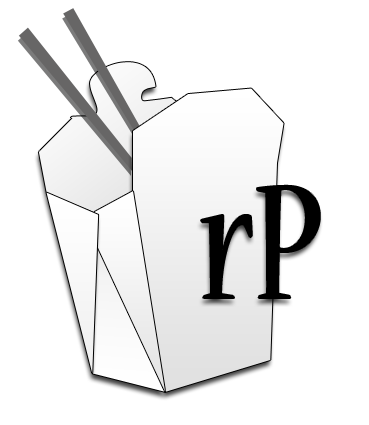
<style>
.page{position:relative;width:369px;height:425px;background:#ffffff}
.page>*{position:absolute;margin:0}
.t1{font:180px "NuevaStd-Cond";color:#000000}
</style>
<div class="page">
<p class="t1" style="left:201px;top:185px;width:119px;height:113px">rP</p>
</div>
